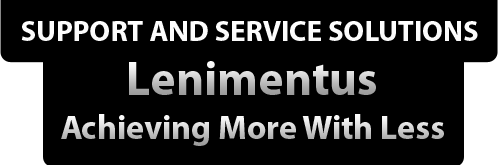
<style>
.page{position:relative;width:498px;height:165px;background:#000000}
.page>*{position:absolute;margin:0}
.t1{font:29px "MyriadPro-Bold";color:#ffffff;text-transform:uppercase}
.t2{font:48px "MyriadPro-Bold"}
.t3{font:34px "MyriadPro-Bold"}
</style>
<div class="page">
<p class="t1" style="left:21px;top:21px;width:457px;height:20px">Support And Service Solutions</p>
<p class="t2" style="left:129px;top:61px;width:247px;height:34px">Lenimentus</p>
<p class="t3" style="left:61px;top:114px;width:383px;height:32px">Achieving More With Less</p>
</div>
